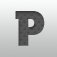
<style>
.page{position:relative;width:57px;height:57px}
.page>*{position:absolute;margin:0}
.t1{font:48px "Museo900-Regular";color:#535353;font-weight:bold}
</style>
<div class="page">
<p class="t1" style="left:15px;top:11px;width:30px;height:35px">P</p>
</div>
